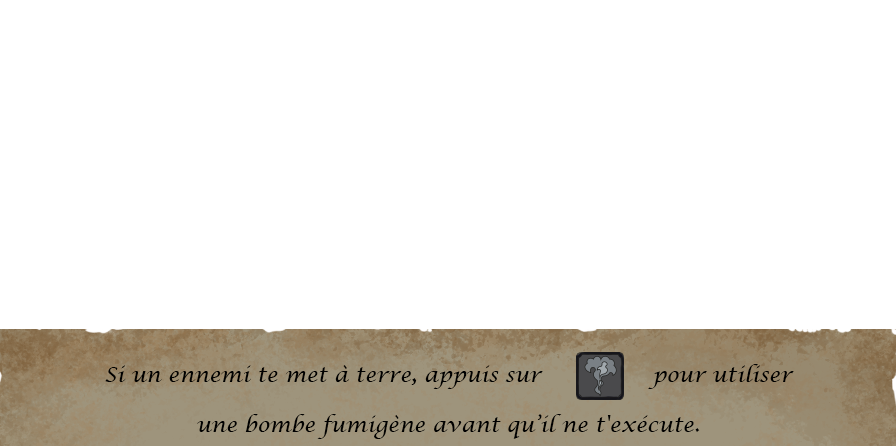
<style>
.page{position:relative;width:896px;height:446px;background:#ffffff}
.page>*{position:absolute;margin:0}
.t1{font:21px "LucidaCalligraphy-Italic";color:#000000}
</style>
<div class="page">
<p class="t1" style="left:105px;top:364px;width:689px;height:75px;text-align:center">Si un ennemi te met à terre, appuis sur                pour utiliser<br><br>une bombe fumigène avant qu’il ne t'exécute.</p>
</div>
